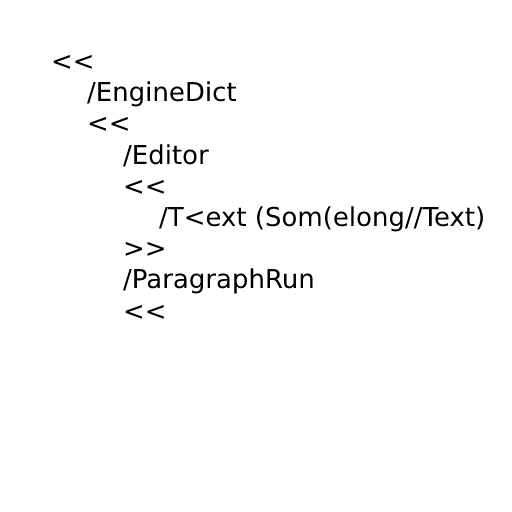
<style>
.page{position:relative;width:512px;height:512px;background:#ffffff}
.page>*{position:absolute;margin:0}
.t1{font:26px "DejaVuSans";color:#000000}
</style>
<div class="page">
<p class="t1" style="left:53px;top:55px;width:430px;height:264px">&lt;&lt;<br> /EngineDict<br> &lt;&lt;<br>  /Editor<br>  &lt;&lt;<br>   /T&lt;ext (Som(elong//Text)<br>  &gt;&gt;<br>  /ParagraphRun<br>  &lt;&lt;</p>
</div>
